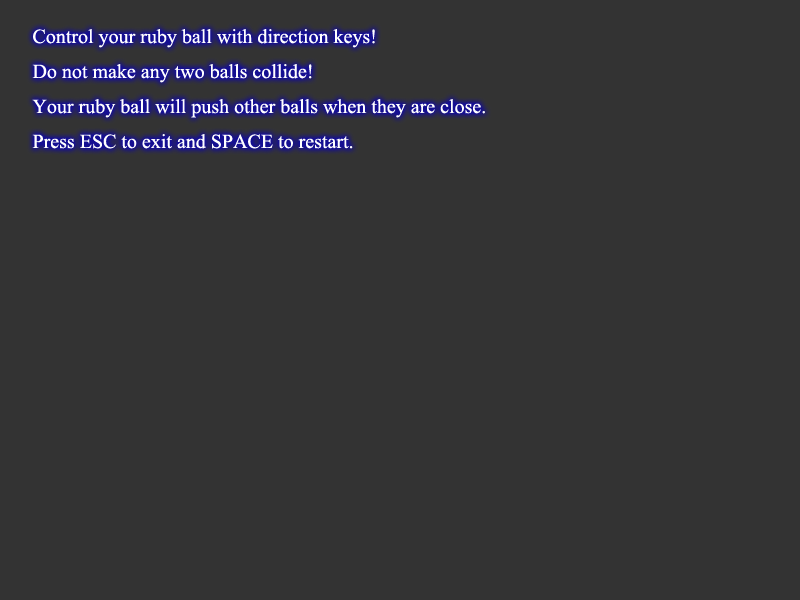
<style>
.page{position:relative;width:800px;height:600px;background:#333333}
.page>*{position:absolute;margin:0}
.t1{font:20px "TimesNewRomanPSMT";color:#ffffff}
</style>
<div class="page">
<p class="t1" style="left:32px;top:29px;width:453px;height:120px">Control your ruby ball with direction keys! <br>Do not make any two balls collide! <br>Your ruby ball will push other balls when they are close. <br>Press ESC to exit and SPACE to restart.</p>
</div>
